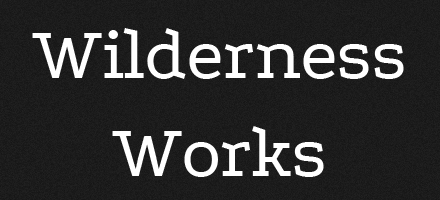
<style>
.page{position:relative;width:440px;height:200px}
.page>*{position:absolute;margin:0}
.t1{font:76px "Podkova";letter-spacing:-0.02em;color:#ffffff}
</style>
<div class="page">
<p class="t1" style="left:32px;top:28px;width:372px;height:149px;text-align:center">Wilderness<br>Works</p>
</div>
